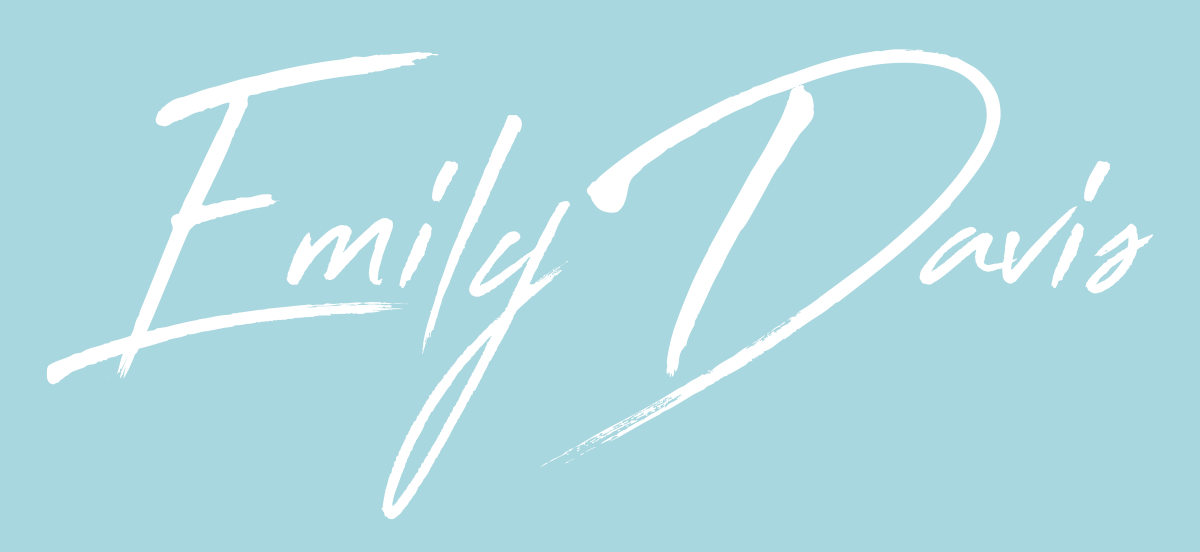
<style>
.page{position:relative;width:1200px;height:552px;background:#a8d7df}
.page>*{position:absolute;margin:0}
.t1{font:392.5px "FlashBack";color:#ffffff}
</style>
<div class="page">
<p class="t1" style="left:46px;top:49px;width:1107px;height:471px">Emily Davis</p>
</div>
